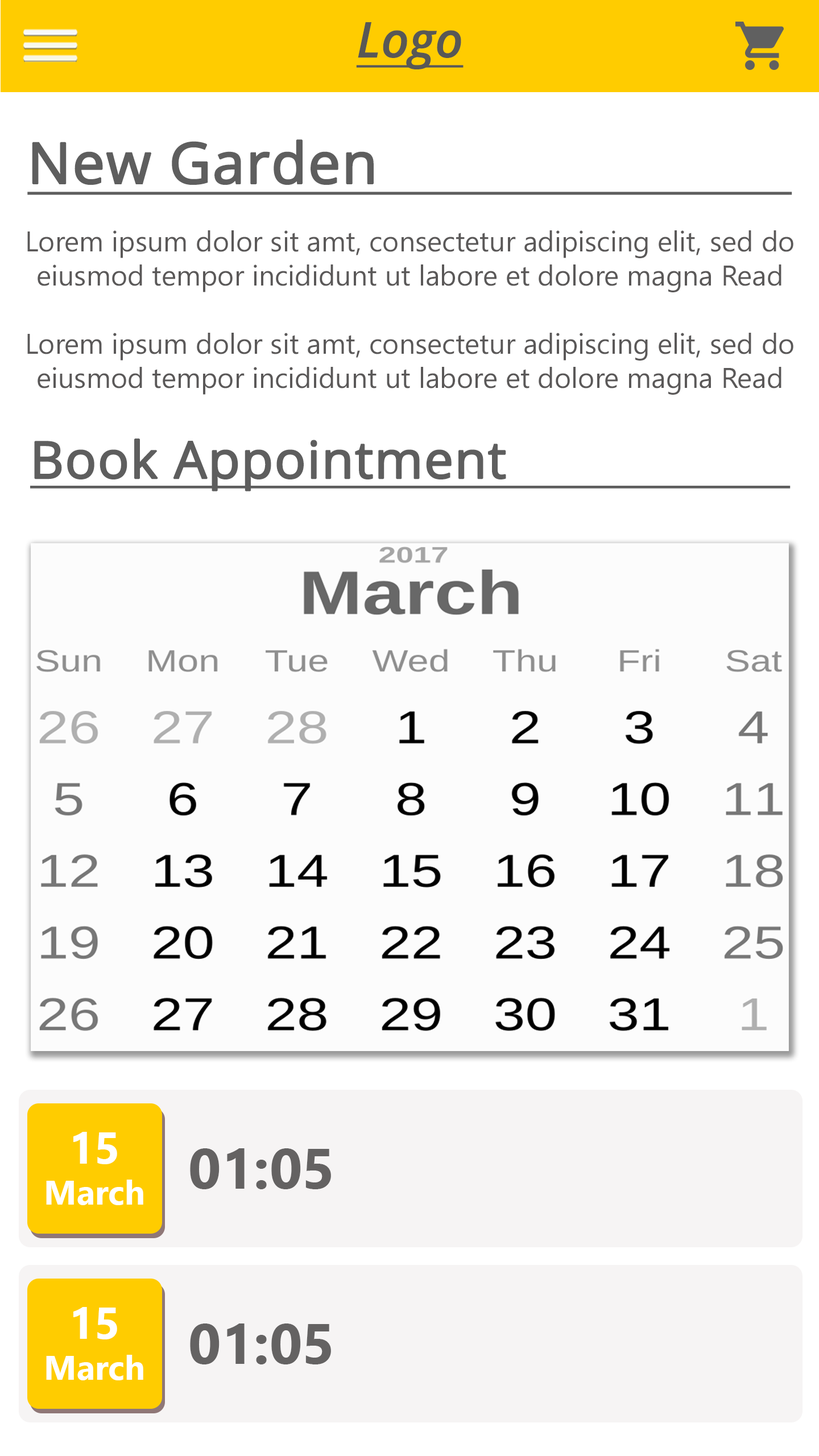
<style>
.page{position:relative;width:819px;height:1456px;background:#ffffff}
.page>*{position:absolute;margin:0}
.t1{font:49.3px "OpenSans-SemiboldItalic";color:#585856;text-decoration:underline}
.t2{font:56.9px "OpenSans";color:#5e5e5e;font-weight:bold;text-decoration:underline}
.t3{font:28.4px "NirmalaUI";color:#5a5858}
.t4{font:51.2px "OpenSans";color:#5e5e5e;font-weight:bold;text-decoration:underline}
.t5{font:34.1px "NirmalaUI-Bold";color:#ffffff}
.t6{font:44.5px "NirmalaUI-Bold";color:#ffffff}
.t7{font:56.9px "NirmalaUI-Bold";color:#646262}
</style>
<div class="page">
<p class="t1" style="left:356px;top:22px;width:108px;height:47px">Logo</p>
<p class="t2" style="left:27px;top:139px;width:765px;height:56px">New Garden</p>
<p class="t3" style="left:27px;top:230px;width:766px;height:165px;text-align:center">Lorem ipsum dolor sit amt, consectetur adipiscing elit, sed do eiusmod tempor incididunt ut labore et dolore magna Read <br><br>Lorem ipsum dolor sit amt, consectetur adipiscing elit, sed do eiusmod tempor incididunt ut labore et dolore magna Read</p>
<p class="t4" style="left:30px;top:439px;width:761px;height:52px">Book Appointment</p>
<p class="t5" style="left:46px;top:1132px;width:97px;height:73px;text-align:center"><span class="t6">15<br></span>March</p>
<p class="t7" style="left:190px;top:1148px;width:141px;height:41px">01:05</p>
<p class="t5" style="left:46px;top:1307px;width:97px;height:73px;text-align:center"><span class="t6">15<br></span>March</p>
<p class="t7" style="left:190px;top:1323px;width:141px;height:41px">01:05</p>
</div>
